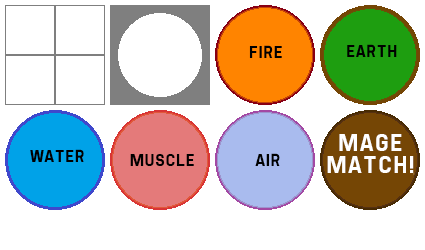
<style>
.page{position:relative;width:425px;height:250px;background:#ffffff}
.page>*{position:absolute;margin:0}
.t1{font:14.7px "FreeroadRegular";letter-spacing:0.08em;color:#000000}
.t2{font:21.3px/21.3px "FreeroadRegular";letter-spacing:0.08em;color:#ffffff}
</style>
<div class="page">
<p class="t1" style="left:249px;top:45px;width:33px;height:13px">FIRE</p>
<p class="t1" style="left:347px;top:44px;width:50px;height:13px">EARTH</p>
<p class="t2" style="left:327px;top:134px;width:87px;height:39px;text-align:center">MAGE<br>MATCH!</p>
<p class="t1" style="left:30px;top:149px;width:54px;height:13px">WATER</p>
<p class="t1" style="left:130px;top:154px;width:64px;height:12px">MUSCLE</p>
<p class="t1" style="left:255px;top:153px;width:25px;height:13px">AIR</p>
</div>
